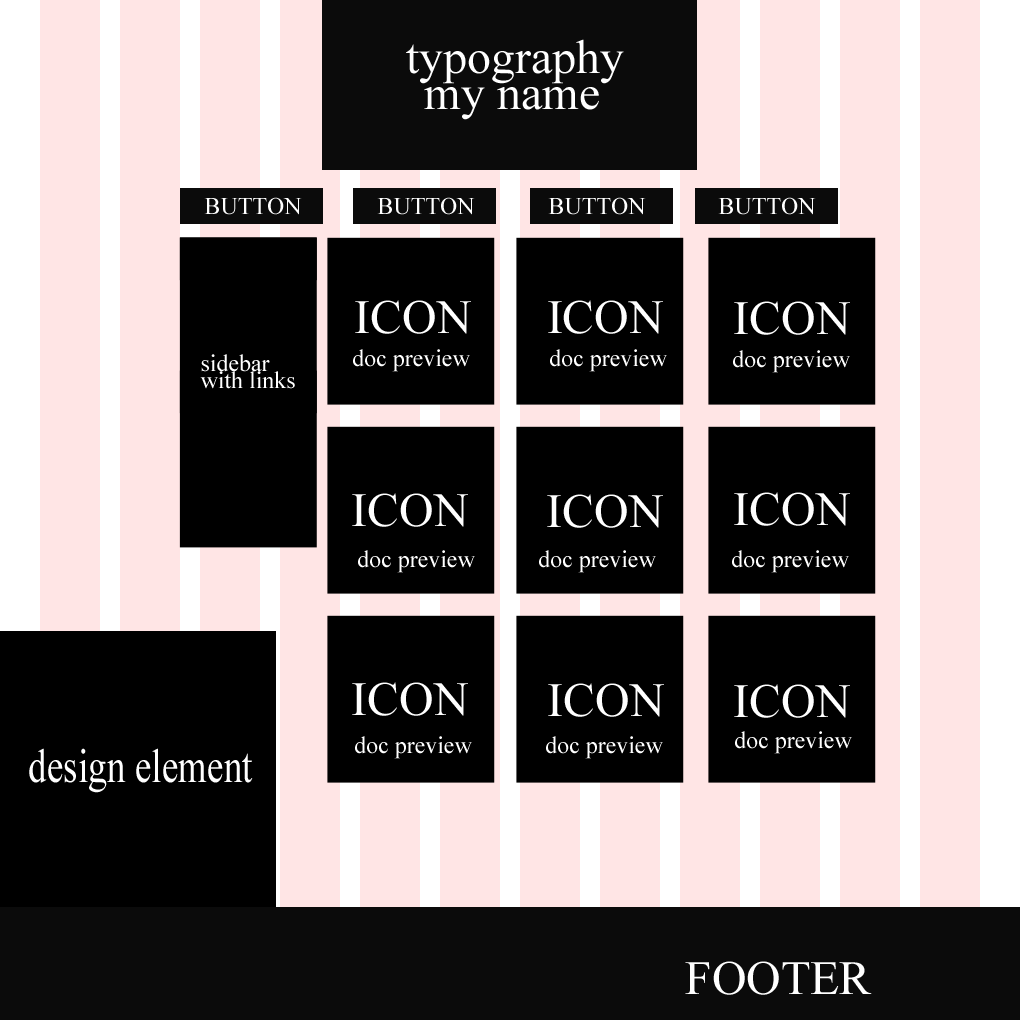
<style>
.page{position:relative;width:1020px;height:1020px;background:#000000}
.page>*{position:absolute;margin:0}
.t1{font:47.8px "TimesNewRomanPSMT"}
.t2{font:47.8px "TimesNewRomanPSMT";color:#ffffff}
.t3{font:23.9px "TimesNewRomanPSMT";color:#ffffff}
.t4{font:47.8px "TimesNewRomanPSMT";color:#ffffff;scale:0.78 1}
</style>
<div class="page">
<p class="t1" style="left:404px;top:38px;width:218px;height:45px">typography</p>
<p class="t2" style="left:406px;top:39px;width:218px;height:45px">typography</p>
<p class="t1" style="left:424px;top:82px;width:175px;height:33px">my name</p>
<p class="t2" style="left:424px;top:87px;width:175px;height:33px">my name</p>
<p class="t3" style="left:204px;top:197px;width:98px;height:18px">BUTTON</p>
<p class="t3" style="left:377px;top:197px;width:98px;height:18px">BUTTON</p>
<p class="t3" style="left:548px;top:197px;width:98px;height:18px">BUTTON</p>
<p class="t3" style="left:718px;top:197px;width:98px;height:18px">BUTTON</p>
<p class="t2" style="left:355px;top:300px;width:116px;height:34px">ICON</p>
<p class="t2" style="left:548px;top:300px;width:115px;height:34px">ICON</p>
<p class="t2" style="left:734px;top:301px;width:116px;height:34px">ICON</p>
<p class="t3" style="left:353px;top:349px;width:117px;height:23px">doc preview</p>
<p class="t3" style="left:550px;top:349px;width:117px;height:23px">doc preview</p>
<p class="t3" style="left:733px;top:350px;width:117px;height:23px">doc preview</p>
<p class="t3" style="left:201px;top:354px;width:69px;height:18px">sidebar</p>
<p class="t3" style="left:200px;top:371px;width:95px;height:18px">with links</p>
<p class="t2" style="left:352px;top:493px;width:116px;height:34px">ICON</p>
<p class="t2" style="left:547px;top:494px;width:116px;height:34px">ICON</p>
<p class="t2" style="left:734px;top:492px;width:116px;height:34px">ICON</p>
<p class="t3" style="left:358px;top:550px;width:117px;height:23px">doc preview</p>
<p class="t3" style="left:539px;top:550px;width:117px;height:23px">doc preview</p>
<p class="t3" style="left:732px;top:550px;width:117px;height:23px">doc preview</p>
<p class="t2" style="left:352px;top:682px;width:116px;height:34px">ICON</p>
<p class="t2" style="left:548px;top:683px;width:116px;height:34px">ICON</p>
<p class="t2" style="left:734px;top:684px;width:116px;height:34px">ICON</p>
<p class="t3" style="left:355px;top:736px;width:117px;height:23px">doc preview</p>
<p class="t3" style="left:546px;top:736px;width:117px;height:23px">doc preview</p>
<p class="t3" style="left:735px;top:731px;width:117px;height:23px">doc preview</p>
<p class="t4" style="left:29px;top:748px;width:224px;height:45px">design element</p>
<p class="t2" style="left:685px;top:961px;width:187px;height:34px">FOOTER</p>
</div>
